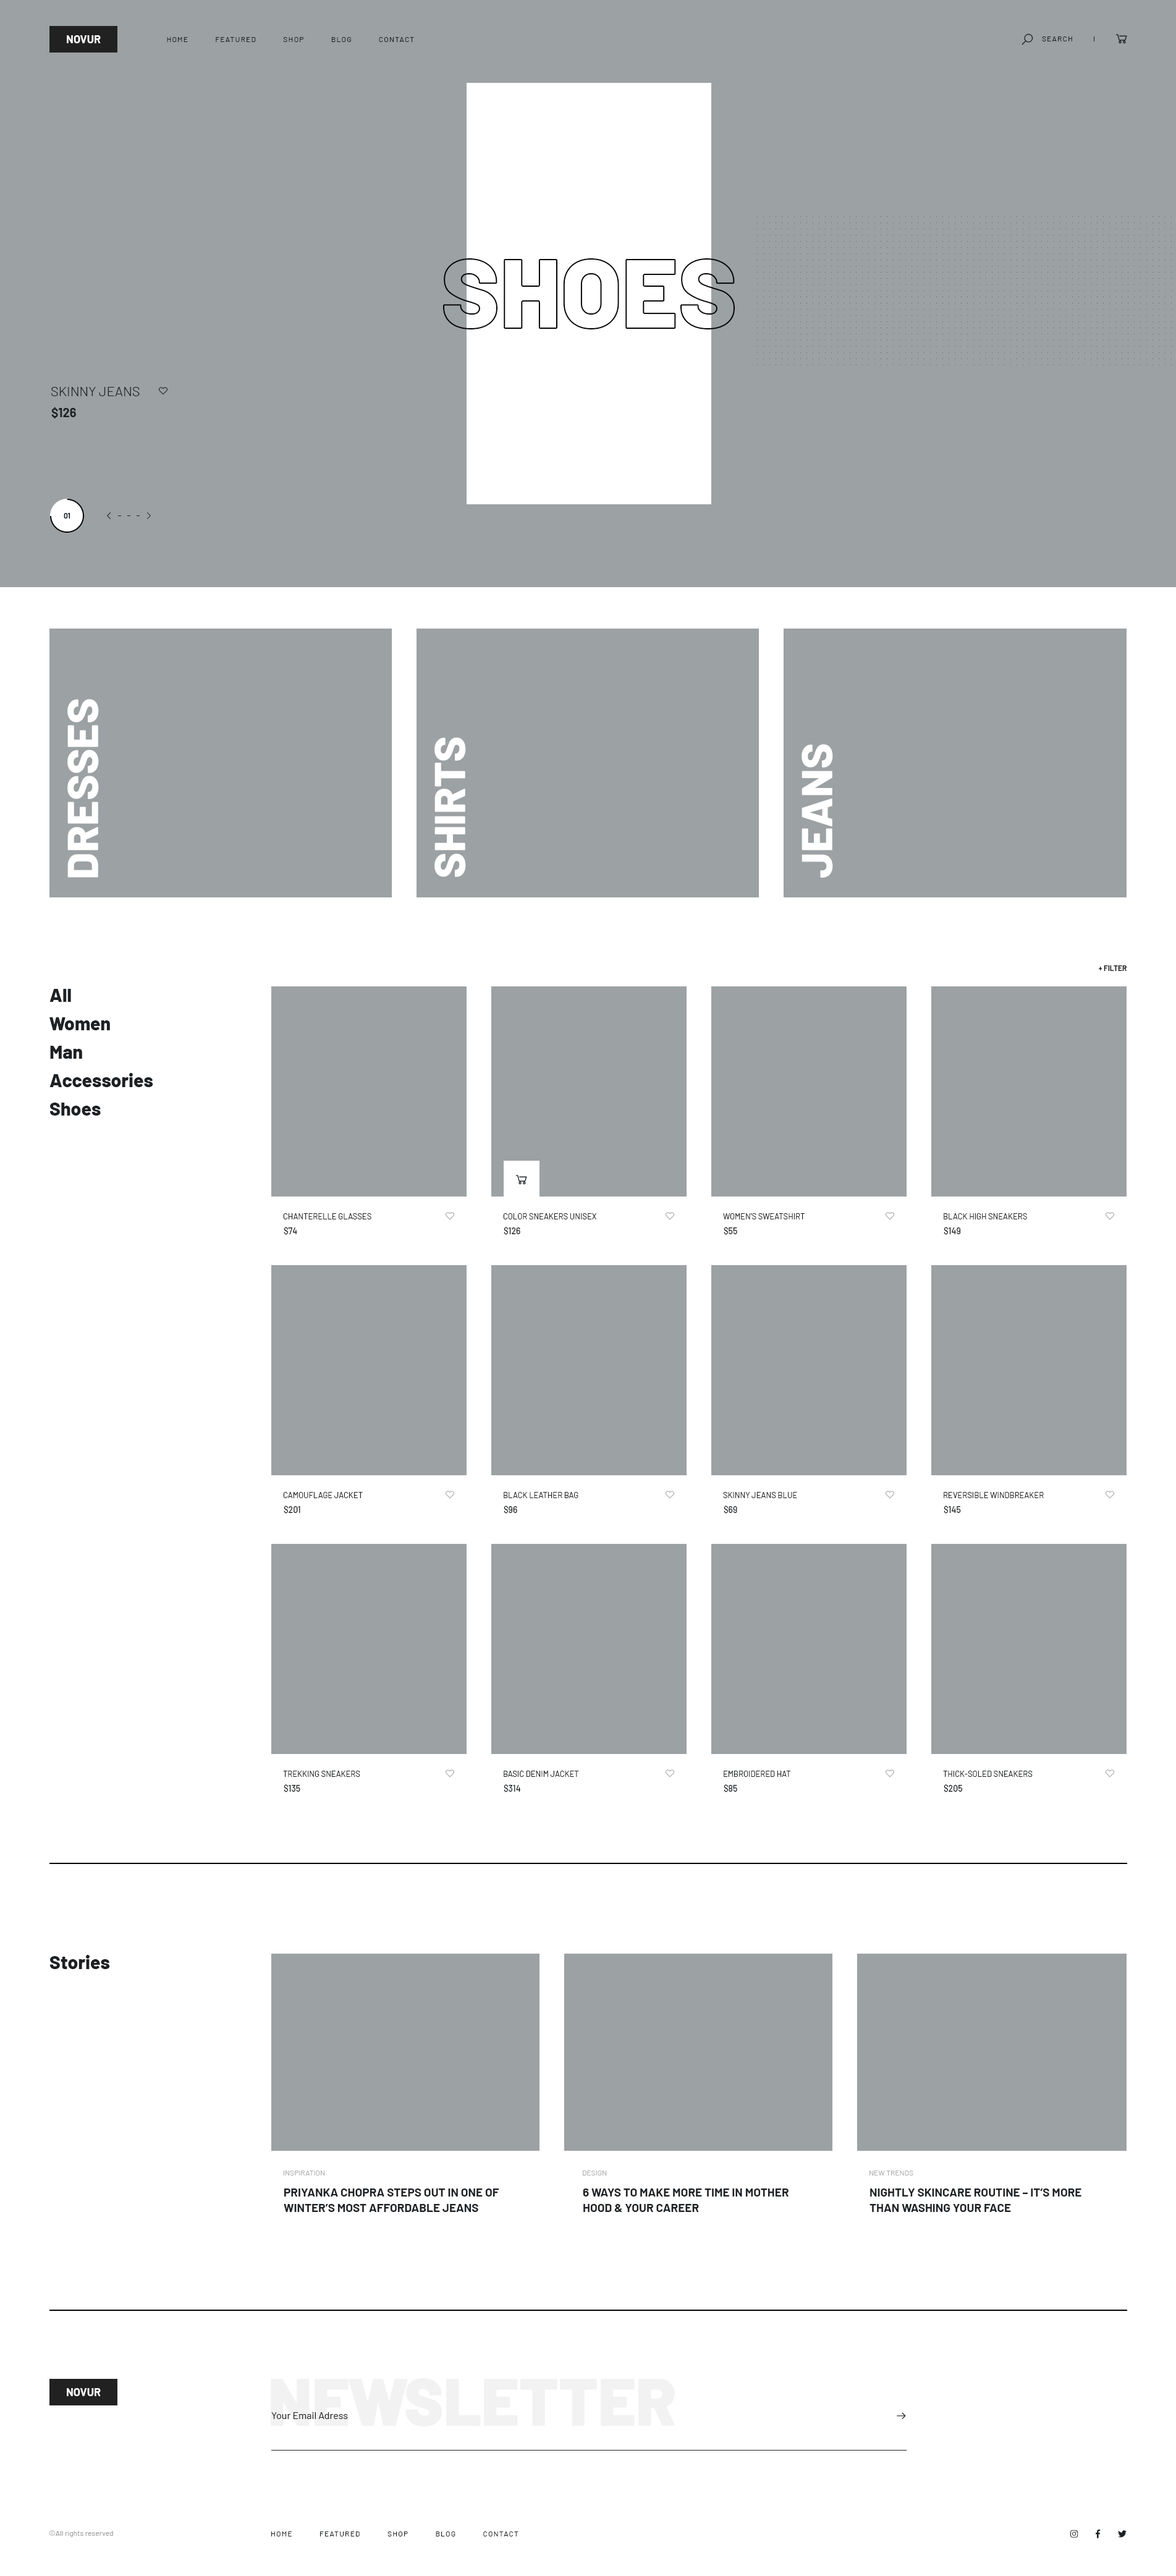
<style>
.page{position:relative;width:1176px;height:2576px;background:#ffffff}
.page>*{position:absolute;margin:0}
.t1{font:11.1px "Barlow-Bold";color:#fefefe;text-transform:uppercase}
.t2{font:7.4px "Barlow-Regular";letter-spacing:0.1em;color:#1e2124;text-transform:uppercase}
.t3{font:13.6px "Barlow-Light";color:#1e2124;text-transform:uppercase}
.t4{font:12.4px "Barlow-Bold";color:#1e2124}
.t5{font:7.4px "Barlow-Bold";color:#1e2124;text-transform:uppercase}
.t6{font:43.3px "Barlow-ExtraBold";color:#ffffff;text-transform:uppercase}
.t7{font:18.5px/28.4px "Barlow-ExtraBold";color:#1e2124}
.t8{font:8px "Barlow-Regular";color:#1e2124;text-transform:uppercase}
.t9{font:8.7px "Barlow-Medium";color:#1e2124}
.t10{font:18.5px "Barlow-ExtraBold";color:#1e2124}
.t11{font:7.4px "Barlow-Regular";color:#aeaeae;text-transform:uppercase}
.t12{font:11.7px/15.5px "Barlow-Bold";color:#1e2124;text-transform:uppercase}
.t13{font:66.1px "Barlow-Black";color:#f2f2f2}
.t14{font:9.9px "Barlow-Regular";color:#1e2124}
.t15{font:7.4px "Barlow-Regular";color:#9e9d9d}
</style>
<div class="page">
<p class="t1" style="left:67px;top:35px;width:34px;height:8px">novur</p>
<p class="t2" style="left:167px;top:37px;width:247px;height:5px">Home            Featured            Shop            Blog            Contact</p>
<p class="t2" style="left:1042px;top:36px;width:30px;height:5px">Search</p>
<p class="t3" style="left:51px;top:387px;width:89px;height:9px">SKINNY JEANS</p>
<p class="t4" style="left:51px;top:407px;width:25px;height:11px">$126</p>
<p class="t5" style="left:64px;top:513px;width:6px;height:6px">01</p>
<p class="t6" style="left:67px;top:699px;width:32px;height:179px;rotate:-90deg">Dresses</p>
<p class="t6" style="left:434px;top:737px;width:32px;height:140px;rotate:-90deg">Shirts</p>
<p class="t6" style="left:802px;top:744px;width:31px;height:134px;rotate:-90deg">JEANS</p>
<p class="t5" style="left:1099px;top:965px;width:28px;height:6px">+ Filter</p>
<p class="t7" style="left:49px;top:989px;width:104px;height:127px">All<br>Women<br>Man<br>Accessories<br>Shoes</p>
<p class="t8" style="left:283px;top:1213px;width:88px;height:6px">Chanterelle Glasses</p>
<p class="t8" style="left:503px;top:1213px;width:93px;height:6px">Color Sneakers Unisex</p>
<p class="t8" style="left:723px;top:1213px;width:82px;height:6px">Women's Sweatshirt</p>
<p class="t8" style="left:944px;top:1213px;width:83px;height:6px">Black High Sneakers</p>
<p class="t9" style="left:284px;top:1227px;width:13px;height:8px">$74</p>
<p class="t9" style="left:504px;top:1227px;width:16px;height:8px">$126</p>
<p class="t9" style="left:724px;top:1227px;width:13px;height:8px">$55</p>
<p class="t9" style="left:944px;top:1227px;width:17px;height:8px">$149</p>
<p class="t8" style="left:283px;top:1492px;width:80px;height:6px">Camouflage Jacket</p>
<p class="t8" style="left:504px;top:1492px;width:74px;height:6px">Black Leather Bag</p>
<p class="t8" style="left:723px;top:1492px;width:74px;height:6px">Skinny Jeans Blue</p>
<p class="t8" style="left:944px;top:1492px;width:100px;height:6px">Reversible Windbreaker</p>
<p class="t9" style="left:284px;top:1506px;width:16px;height:8px">$201</p>
<p class="t9" style="left:504px;top:1506px;width:13px;height:8px">$96</p>
<p class="t9" style="left:724px;top:1506px;width:13px;height:8px">$69</p>
<p class="t9" style="left:944px;top:1506px;width:17px;height:8px">$145</p>
<p class="t8" style="left:283px;top:1771px;width:77px;height:6px">Trekking Sneakers</p>
<p class="t8" style="left:504px;top:1771px;width:75px;height:6px">Basic Denim Jacket</p>
<p class="t8" style="left:724px;top:1771px;width:67px;height:6px">Embroidered Hat</p>
<p class="t8" style="left:943px;top:1771px;width:90px;height:6px">Thick-Soled Sneakers</p>
<p class="t9" style="left:284px;top:1784px;width:16px;height:8px">$135</p>
<p class="t9" style="left:504px;top:1784px;width:17px;height:8px">$314</p>
<p class="t9" style="left:724px;top:1784px;width:13px;height:8px">$85</p>
<p class="t9" style="left:944px;top:1784px;width:19px;height:8px">$205</p>
<p class="t10" style="left:50px;top:1955px;width:60px;height:14px">Stories</p>
<p class="t11" style="left:284px;top:2171px;width:41px;height:5px">Inspiration</p>
<p class="t11" style="left:583px;top:2171px;width:24px;height:5px">Design</p>
<p class="t11" style="left:870px;top:2171px;width:43px;height:5px">New Trends</p>
<p class="t12" style="left:284px;top:2188px;width:215px;height:24px">Priyanka Chopra Steps out in One of <br>Winter’s Most Affordable Jeans</p>
<p class="t12" style="left:583px;top:2188px;width:206px;height:24px">6 Ways To Make More Time in Mother<br>hood &amp; Your Career</p>
<p class="t12" style="left:870px;top:2188px;width:212px;height:24px">Nightly Skincare Routine – It’s More <br>Than Washing Your Face</p>
<p class="t13" style="left:271px;top:2378px;width:404px;height:48px">NEWSLETTER</p>
<p class="t1" style="left:67px;top:2388px;width:34px;height:8px">Novur</p>
<p class="t14" style="left:271px;top:2412px;width:77px;height:7px">Your Email Adress</p>
<p class="t15" style="left:49px;top:2530px;width:64px;height:7px">©All rights reserved</p>
<p class="t2" style="left:271px;top:2532px;width:248px;height:4px">Home            Featured            Shop            Blog            Contact</p>
</div>
